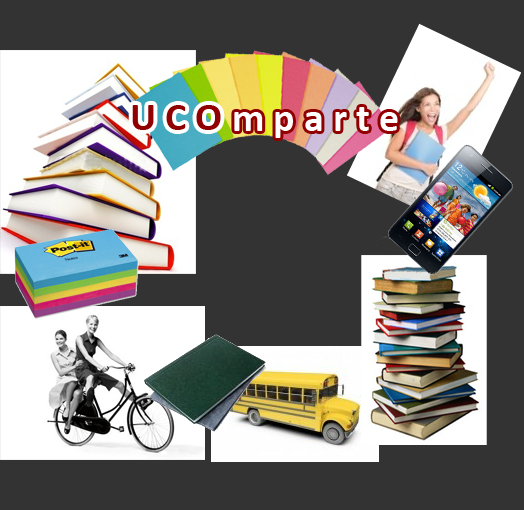
<style>
.page{position:relative;width:524px;height:510px;background:#333333}
.page>*{position:absolute;margin:0}
.t1{font:40px "Calibri-Bold";color:#900000}
.t2{font:40px "Calibri-Bold";color:#fefefe}
</style>
<div class="page">
<p class="t1" style="left:132px;top:105px;width:89px;height:25px">U C O</p>
<p class="t2" style="left:234px;top:107px;width:164px;height:31px">m p a r t e</p>
</div>
